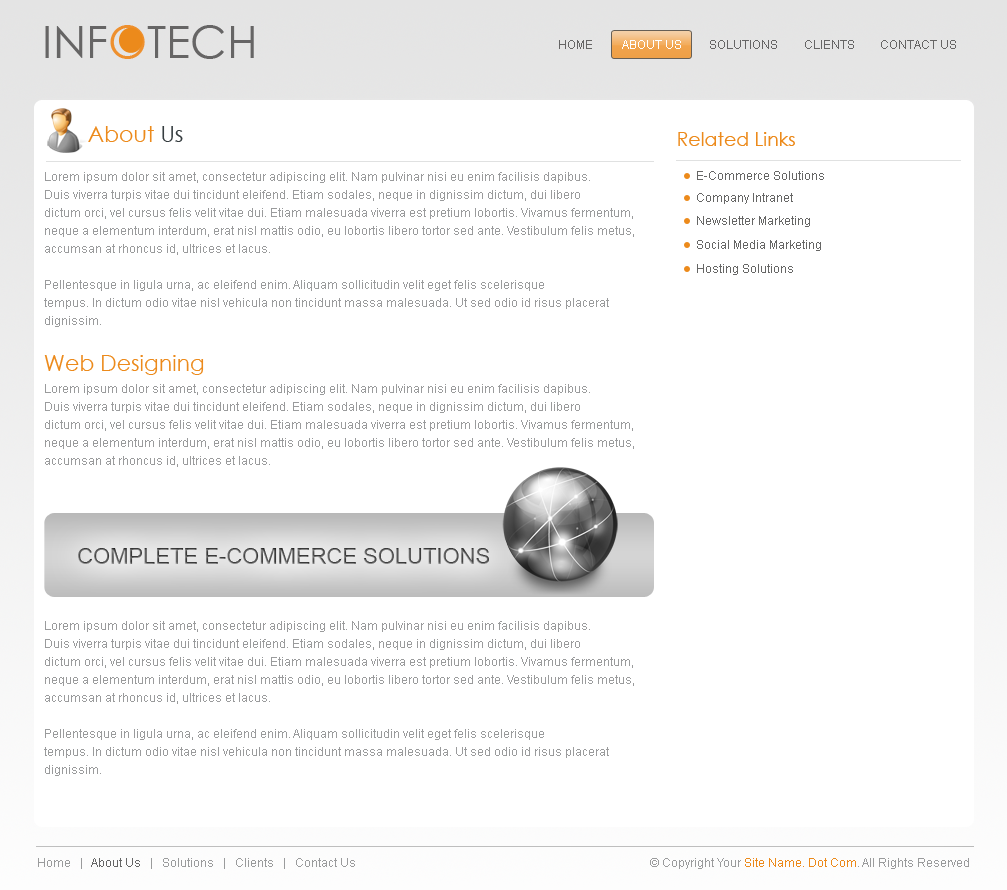
<style>
.page{position:relative;width:1007px;height:890px;background:#ffffff}
.page>*{position:absolute;margin:0}
.t1{font:45.1px "CenturyGothic";color:#666565}
.t2{font:45.1px "CenturyGothic";color:#ee902e}
.t3{font:12px "ArialMT";color:#666565}
.t4{font:12px "ArialMT";color:#ffffff}
.t5{font:22px "CenturyGothic";color:#ec8a1b}
.t6{font:22px "CenturyGothic";color:#363d40}
.t7{font:19px "CenturyGothic";color:#ec8a1b}
.t8{font:12px/18px "ArialMT";color:#9a9b9c}
.t9{font:12px "ArialMT";color:#666665}
.t10{font:22px "ArialMT"}
.t11{font:12px "ArialMT";color:#9a9b9c}
.t12{font:12px "ArialMT";color:#666666}
.t13{font:12px "ArialMT";color:#ec8a1b}
</style>
<div class="page">
<p class="t1" style="left:45px;top:25px;width:209px;height:34px">INF<span class="t2">O</span>TECH</p>
<p class="t3" style="left:559px;top:40px;width:33px;height:9px">HOME</p>
<p class="t4" style="left:622px;top:40px;width:59px;height:9px">ABOUT US</p>
<p class="t3" style="left:710px;top:40px;width:67px;height:9px">SOLUTIONS</p>
<p class="t3" style="left:805px;top:40px;width:49px;height:9px">CLIENTS</p>
<p class="t3" style="left:881px;top:40px;width:75px;height:9px">CONTACT US</p>
<p class="t5" style="left:88px;top:126px;width:95px;height:16px">About <span class="t6">Us</span></p>
<p class="t7" style="left:678px;top:132px;width:117px;height:14px">Related Links</p>
<p class="t8" style="left:44px;top:172px;width:590px;height:155px">Lorem ipsum dolor sit amet, consectetur adipiscing elit. Nam pulvinar nisi eu enim facilisis dapibus. <br>Duis viverra turpis vitae dui tincidunt eleifend. Etiam sodales, neque in dignissim dictum, dui libero <br>dictum orci, vel cursus felis velit vitae dui. Etiam malesuada viverra est pretium lobortis. Vivamus fermentum, <br>neque a elementum interdum, erat nisl mattis odio, eu lobortis libero tortor sed ante. Vestibulum felis metus, <br>accumsan at rhoncus id, ultrices et lacus. <br><br>Pellentesque in ligula urna, ac eleifend enim. Aliquam sollicitudin velit eget felis scelerisque <br>tempus. In dictum odio vitae nisl vehicula non tincidunt massa malesuada. Ut sed odio id risus placerat <br>dignissim.</p>
<p class="t9" style="left:697px;top:171px;width:127px;height:9px">E-Commerce Solutions</p>
<p class="t9" style="left:697px;top:193px;width:96px;height:11px">Company Intranet</p>
<p class="t9" style="left:697px;top:216px;width:113px;height:11px">Newsletter Marketing</p>
<p class="t9" style="left:697px;top:240px;width:124px;height:11px">Social Media Marketing</p>
<p class="t9" style="left:697px;top:264px;width:96px;height:11px">Hosting Solutions</p>
<p class="t5" style="left:44px;top:355px;width:160px;height:20px">Web Designing</p>
<p class="t8" style="left:45px;top:384px;width:589px;height:83px">Lorem ipsum dolor sit amet, consectetur adipiscing elit. Nam pulvinar nisi eu enim facilisis dapibus. <br>Duis viverra turpis vitae dui tincidunt eleifend. Etiam sodales, neque in dignissim dictum, dui libero <br>dictum orci, vel cursus felis velit vitae dui. Etiam malesuada viverra est pretium lobortis. Vivamus fermentum, <br>neque a elementum interdum, erat nisl mattis odio, eu lobortis libero tortor sed ante. Vestibulum felis metus, <br>accumsan at rhoncus id, ultrices et lacus.</p>
<p class="t10" style="left:78px;top:548px;width:411px;height:16px">COMPLETE E-COMMERCE SOLUTIONS</p>
<p class="t8" style="left:44px;top:621px;width:590px;height:155px">Lorem ipsum dolor sit amet, consectetur adipiscing elit. Nam pulvinar nisi eu enim facilisis dapibus. <br>Duis viverra turpis vitae dui tincidunt eleifend. Etiam sodales, neque in dignissim dictum, dui libero <br>dictum orci, vel cursus felis velit vitae dui. Etiam malesuada viverra est pretium lobortis. Vivamus fermentum, <br>neque a elementum interdum, erat nisl mattis odio, eu lobortis libero tortor sed ante. Vestibulum felis metus, <br>accumsan at rhoncus id, ultrices et lacus.<br><br>Pellentesque in ligula urna, ac eleifend enim. Aliquam sollicitudin velit eget felis scelerisque <br>tempus. In dictum odio vitae nisl vehicula non tincidunt massa malesuada. Ut sed odio id risus placerat <br>dignissim.</p>
<p class="t11" style="left:38px;top:858px;width:317px;height:11px">Home   |   <span class="t12">About Us</span>   |   Solutions   |   Clients   |   Contact Us</p>
<p class="t11" style="left:650px;top:858px;width:319px;height:11px">© Copyright Your <span class="t13">Site Name. Dot Com</span>. All Rights Reserved</p>
</div>
